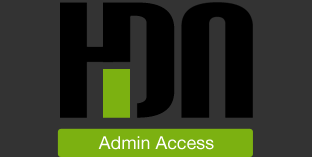
<style>
.page{position:relative;width:312px;height:157px;background:#333333}
.page>*{position:absolute;margin:0}
.t1{font:161.4px "CarbonBl-Regular";color:#000000}
.t2{font:18px "HelveticaNeue";color:#ffffff}
</style>
<div class="page">
<p class="t1" style="left:59px;top:2px;width:71px;height:116px">H</p>
<p class="t1" style="left:103px;top:2px;width:72px;height:116px">D</p>
<p class="t1" style="left:103px;top:2px;width:72px;height:116px">D</p>
<p class="t2" style="left:98px;top:136px;width:116px;height:14px">Admin Access</p>
</div>
